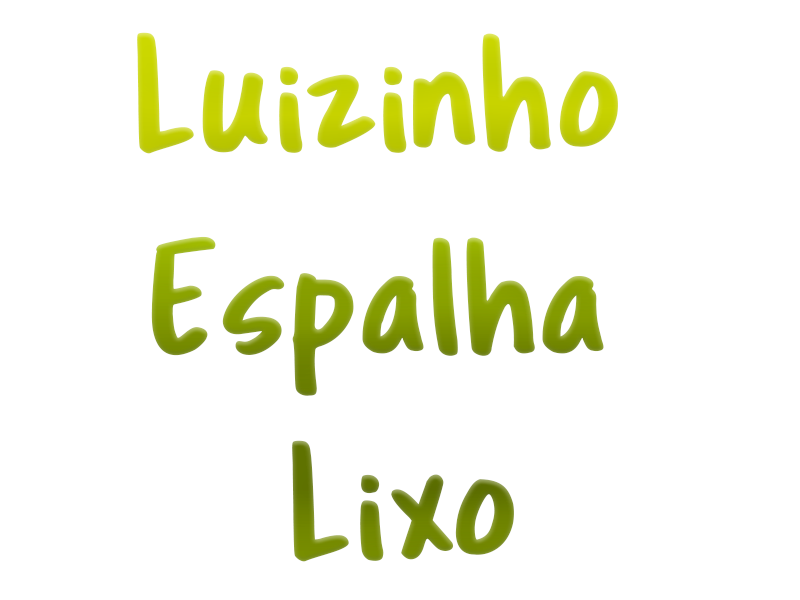
<style>
.page{position:relative;width:800px;height:600px;background:#ffffff}
.page>*{position:absolute;margin:0}
.t1{font:169.8px "TragicMarker-Regular"}
</style>
<div class="page">
<p class="t1" style="left:137px;top:32px;width:481px;height:530px;text-align:center">Luizinho <br>Espalha <br>Lixo</p>
</div>
